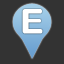
<style>
.page{position:relative;width:64px;height:64px;background:#333333}
.page>*{position:absolute;margin:0}
.t1{font:34px "ArialRoundedMTBold";color:#ffffff;font-weight:bold}
</style>
<div class="page">
<p class="t1" style="left:22px;top:9px;width:21px;height:25px">E</p>
</div>
